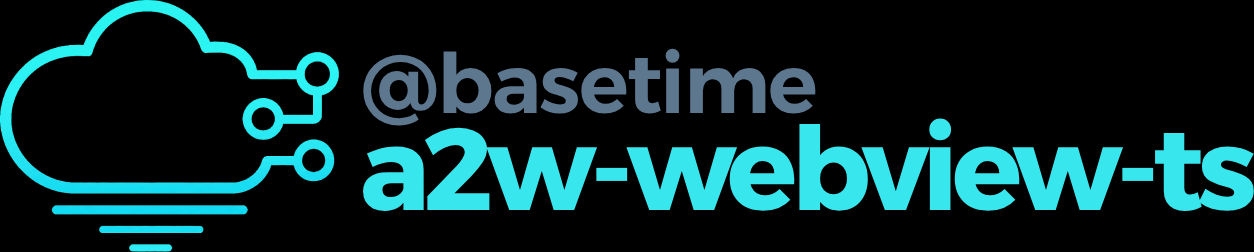
<style>
.page{position:relative;width:1254px;height:252px;background:#000000}
.page>*{position:absolute;margin:0}
.t1{font:83px "Alexandria-SemiBold";letter-spacing:-0.022em;color:#5d778f}
.t2{font:116px "Alexandria-Bold";letter-spacing:-0.056em;color:#38e7ee}
</style>
<div class="page">
<p class="t1" style="left:363px;top:48px;width:453px;height:78px">@basetime</p>
<p class="t2" style="left:363px;top:118px;width:891px;height:93px">a2w-webview-ts</p>
</div>
